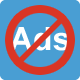
<style>
.page{position:relative;width:80px;height:80px;background:#499ed3}
.page>*{position:absolute;margin:0}
.t1{font:32px "Arial-BoldMT";color:#ffffff}
</style>
<div class="page">
<p class="t1" style="left:10px;top:27px;width:60px;height:24px">Ads</p>
</div>
